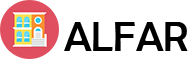
<style>
.page{position:relative;width:191px;height:59px;background:#ffffff}
.page>*{position:absolute;margin:0}
.t1{font:42px "BerlinSansFB-Reg";color:#000000}
</style>
<div class="page">
<p class="t1" style="left:64px;top:22px;width:124px;height:29px">ALFAR</p>
</div>
